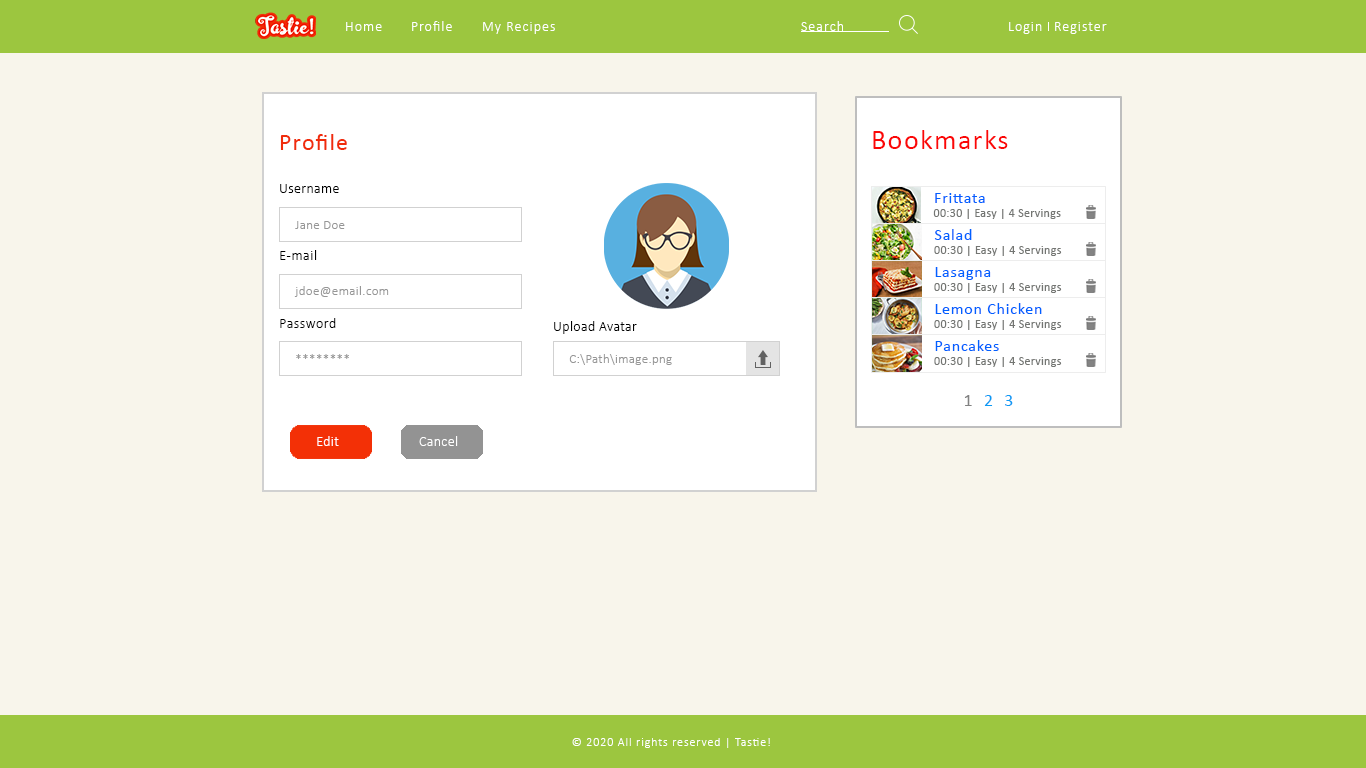
<style>
.page{position:relative;width:1366px;height:768px;background:#f8f5eb}
.page>*{position:absolute;margin:0}
.t1{font:14px "Calibri-Light";letter-spacing:0.075em;color:#ffffff}
.t2{font:24px "Calibri";letter-spacing:0.05em;color:#f02c0b}
.t3{font:28px "Calibri";letter-spacing:0.05em;color:#fb0707}
.t4{font:14px "Calibri-Light";letter-spacing:0.025em;color:#000000}
.t5{font:16px "Calibri";letter-spacing:0.05em;color:#0161ff}
.t6{font:12px "Calibri";letter-spacing:0.025em;color:#737572}
.t7{font:13px "Calibri-Light";letter-spacing:0.025em;color:#969696}
.t8{font:14px "Calibri-Light";letter-spacing:0.04em;color:#000000}
.t9{font:13px "Calibri-Light";letter-spacing:0.03em;color:#969696}
.t10{font:18px "Calibri";letter-spacing:0.2em;color:#0c9af4}
.t11{font:18px "Calibri";letter-spacing:0.2em;color:#828282}
.t12{font:14px "Calibri-Light";letter-spacing:0.025em;color:#ffffff}
.t13{font:12px "Calibri-Light";letter-spacing:0.075em;color:#ffffff}
</style>
<div class="page">
<p class="t1" style="left:346px;top:22px;width:36px;height:9px">Home</p>
<p class="t1" style="left:412px;top:21px;width:40px;height:10px">Profile</p>
<p class="t1" style="left:483px;top:22px;width:72px;height:12px">My Recipes</p>
<p class="t1" style="left:801px;top:21px;width:42px;height:10px">Search</p>
<p class="t1" style="left:1009px;top:22px;width:33px;height:12px">Login</p>
<p class="t1" style="left:1055px;top:22px;width:52px;height:12px">Register</p>
<p class="t2" style="left:280px;top:134px;width:67px;height:16px">Profile</p>
<p class="t3" style="left:873px;top:130px;width:135px;height:19px">Bookmarks</p>
<p class="t4" style="left:280px;top:184px;width:59px;height:9px">Username</p>
<p class="t5" style="left:935px;top:193px;width:50px;height:10px">Frittata</p>
<p class="t6" style="left:933px;top:209px;width:128px;height:10px">00:30 | Easy | 4 Servings</p>
<p class="t7" style="left:295px;top:221px;width:50px;height:8px">Jane Doe</p>
<p class="t5" style="left:934px;top:229px;width:38px;height:11px">Salad</p>
<p class="t6" style="left:934px;top:246px;width:128px;height:10px">00:30 | Easy | 4 Servings</p>
<p class="t8" style="left:280px;top:250px;width:37px;height:10px">E-mail</p>
<p class="t5" style="left:935px;top:267px;width:56px;height:13px">Lasagna</p>
<p class="t9" style="left:294px;top:286px;width:95px;height:11px">jdoe@email.com</p>
<p class="t6" style="left:934px;top:283px;width:128px;height:10px">00:30 | Easy | 4 Servings</p>
<p class="t5" style="left:935px;top:303px;width:107px;height:11px">Lemon Chicken</p>
<p class="t8" style="left:280px;top:318px;width:56px;height:10px">Password</p>
<p class="t4" style="left:554px;top:321px;width:83px;height:13px">Upload Avatar</p>
<p class="t6" style="left:934px;top:320px;width:128px;height:10px">00:30 | Easy | 4 Servings</p>
<p class="t5" style="left:935px;top:340px;width:64px;height:11px">Pancakes</p>
<p class="t9" style="left:296px;top:354px;width:53px;height:5px">********</p>
<p class="t7" style="left:569px;top:354px;width:103px;height:11px">C:\Path\image.png</p>
<p class="t6" style="left:934px;top:357px;width:128px;height:10px">00:30 | Easy | 4 Servings</p>
<p class="t10" style="left:964px;top:395px;width:49px;height:11px"><span class="t11">1</span> 2 3</p>
<p class="t12" style="left:317px;top:436px;width:22px;height:10px">Edit</p>
<p class="t12" style="left:419px;top:436px;width:39px;height:10px">Cancel</p>
<p class="t13" style="left:572px;top:738px;width:198px;height:10px">© 2020 All rights reserved | Tastie!</p>
</div>
